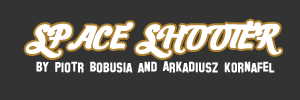
<style>
.page{position:relative;width:300px;height:100px;background:#333333}
.page>*{position:absolute;margin:0}
.t1{font:48px "Les-Mousquetaires";color:#ffffff}
.t2{font:14px "HollywoodHills";color:#ffffff}
</style>
<div class="page">
<p class="t1" style="left:25px;top:20px;width:257px;height:38px">SPACE SHOOTER</p>
<p class="t2" style="left:36px;top:61px;width:239px;height:12px">By Piotr Bobusia and Arkadiusz Kornafel</p>
</div>
